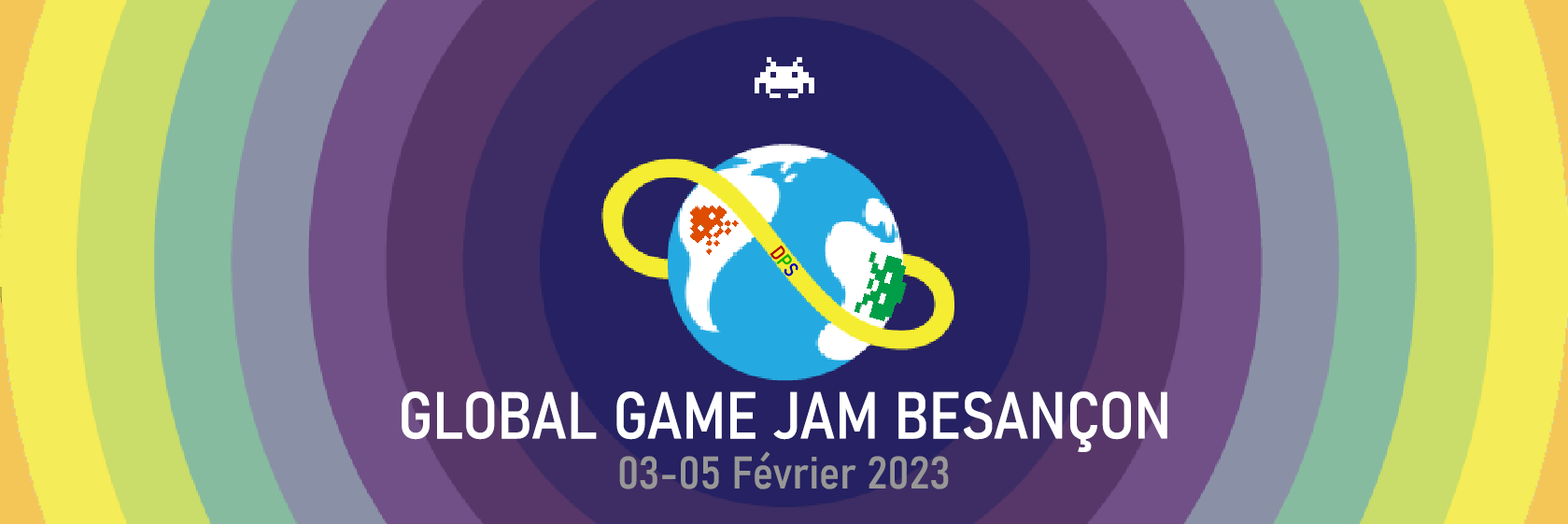
<style>
.page{position:relative;width:1568px;height:524px}
.page>*{position:absolute;margin:0}
.t1{font:20.2px "Bahnschrift-SemiCondensed";color:#b30000}
.t2{font:20.2px "Bahnschrift-SemiCondensed";color:#00b300}
.t3{font:20.2px "Bahnschrift-SemiCondensed";color:#0000b3}
.t4{font:65.4px "Bahnschrift-SemiCondensed";color:#ffffff}
.t5{font:44.8px "Bahnschrift-SemiCondensed";color:#989797}
</style>
<div class="page">
<p class="t1" style="left:770px;top:245px;width:28px;height:31px;rotate:52deg">D<span class="t2">P</span><span class="t3">S</span></p>
<p class="t4" style="left:402px;top:391px;width:765px;height:61px">GLOBAL GAME JAM BESANÇON</p>
<p class="t5" style="left:619px;top:451px;width:330px;height:38px">03-05 Février 2023</p>
</div>
